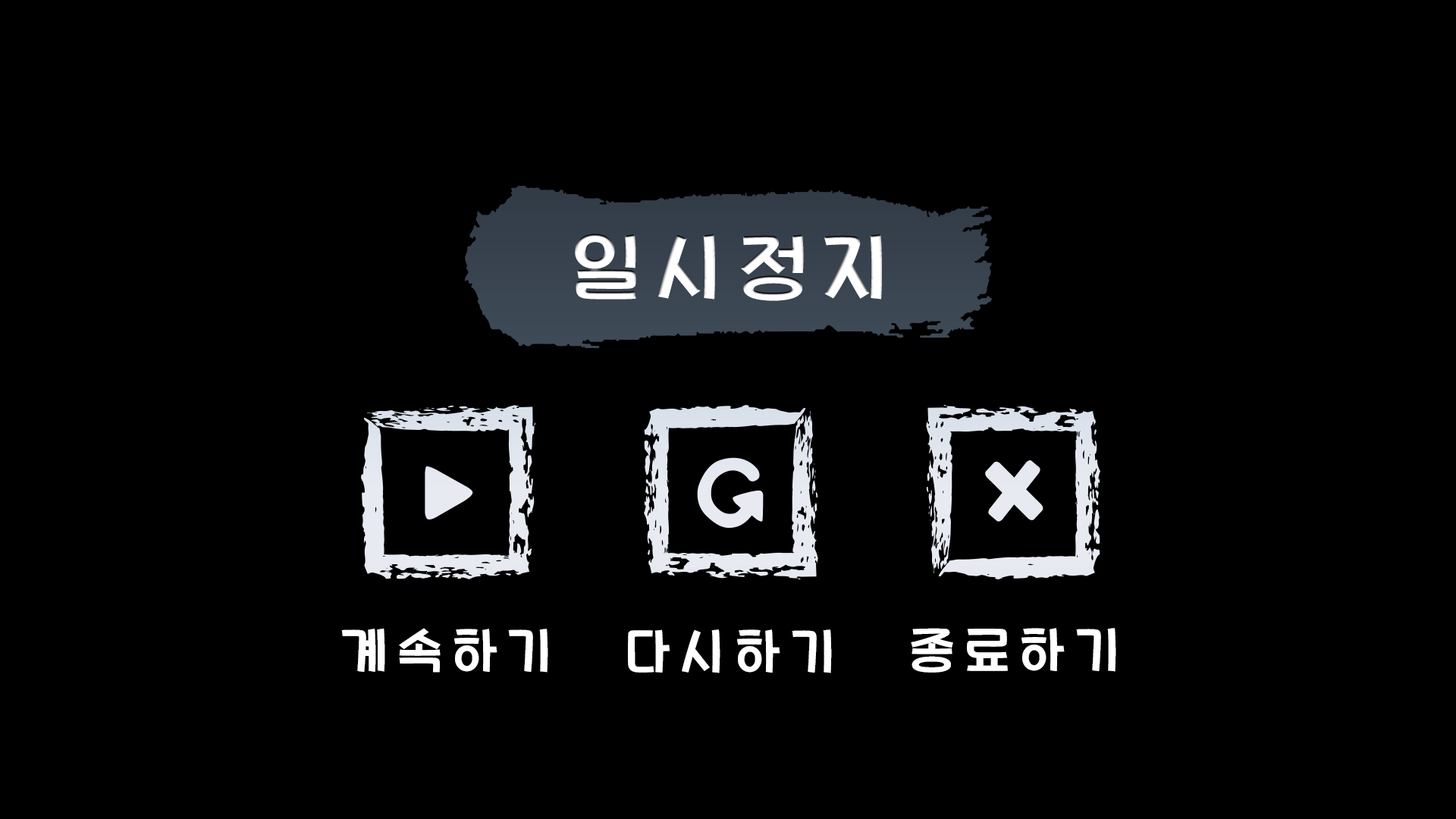
<style>
.page{position:relative;width:1456px;height:819px;background:#000000}
.page>*{position:absolute;margin:0}
.t1{font:75.8px "ImcreSoojin_Regular";letter-spacing:0.2em;color:#ffffff}
.t2{font:50.6px "ImcreSoojin_Regular";letter-spacing:0.2em;color:#ffffff}
</style>
<div class="page">
<p class="t1" style="left:575px;top:234px;width:307px;height:67px">일시정지</p>
<p class="t2" style="left:341px;top:628px;width:207px;height:45px">계속하기</p>
<p class="t2" style="left:628px;top:629px;width:204px;height:44px">다시하기</p>
<p class="t2" style="left:911px;top:628px;width:205px;height:45px">종료하기</p>
</div>
